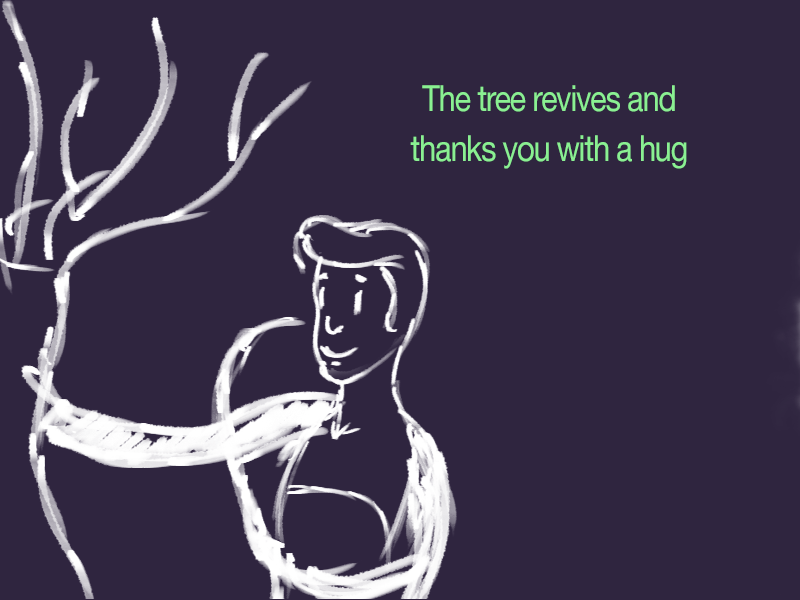
<style>
.page{position:relative;width:800px;height:600px;background:#2f253f}
.page>*{position:absolute;margin:0}
.t1{font:36px/50px "HelveticaNeue";letter-spacing:-0.041em;color:#8af092;scale:0.86 1}
.t2{font:36px/50px "HelveticaNeue";letter-spacing:-0.041em;color:#ffffff;scale:0.86 1}
</style>
<div class="page">
<p class="t1" style="left:410px;top:85px;width:277px;height:84px;text-align:center">The tree revives and thanks you with a hug <br><span class="t2">you</span></p>
</div>
